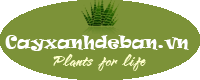
<style>
.page{position:relative;width:200px;height:80px;background:#7c9238}
.page>*{position:absolute;margin:0}
.t1{font:16px "Ravie";color:#ffffff}
.t2{font:12px "VNI-Butlong";color:#ffffcc}
</style>
<div class="page">
<p class="t1" style="left:5px;top:35px;width:184px;height:16px">Cayxanhdeban.vn</p>
<p class="t2" style="left:53px;top:54px;width:93px;height:17px">Plants for life</p>
</div>
